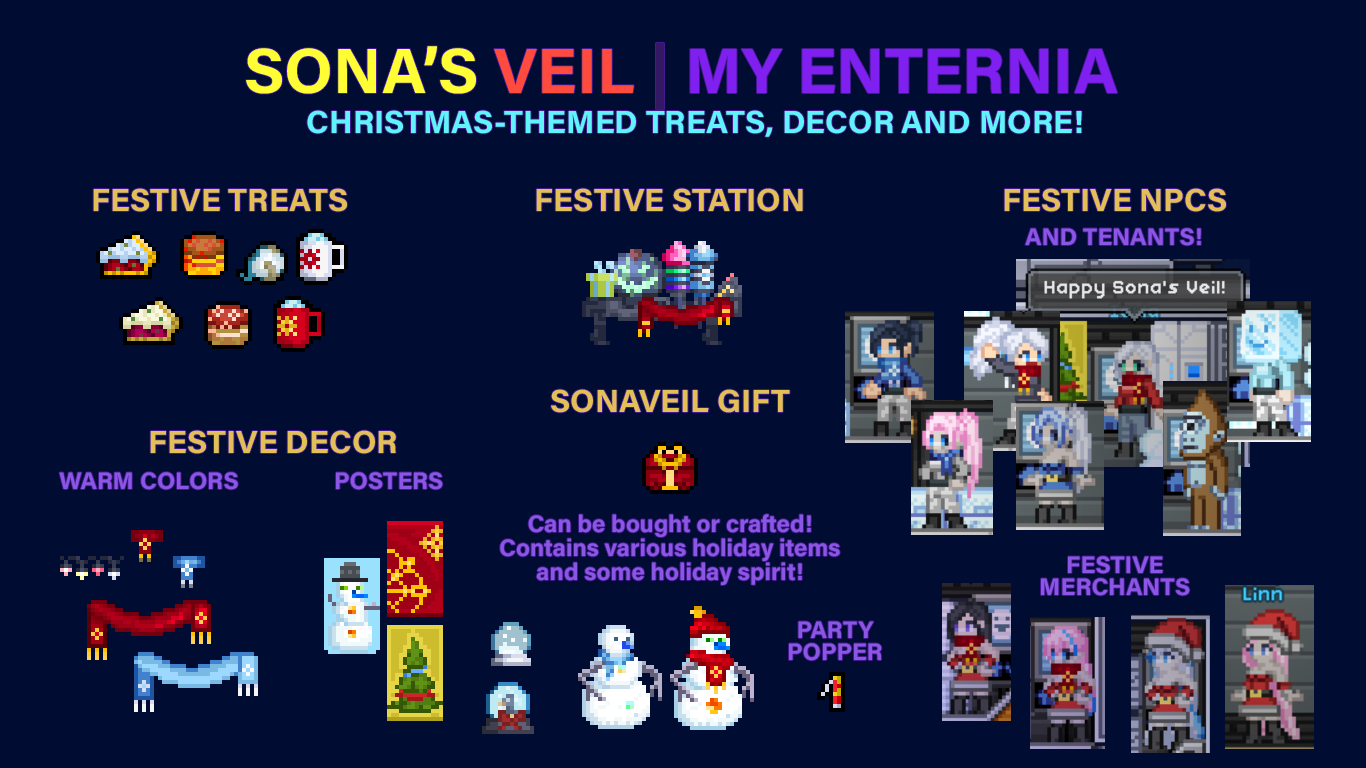
<style>
.page{position:relative;width:1366px;height:768px;background:#000c32}
.page>*{position:absolute;margin:0}
.t1{font:64px "AcuminConcept-Bold";color:#8020f0}
.t2{font:64px "AcuminConcept-Bold";color:#fffd33}
.t3{font:64px "AcuminConcept-Bold";color:#ff4b3d}
.t4{font:64px "AcuminConcept-Bold";color:#341863}
.t5{font:32px "AcuminConcept-Bold";color:#60f3fc}
.t6{font:32px "AcuminConcept-Bold";color:#e3c056}
.t7{font:24px "AcuminConcept-Bold";color:#8a56e3}
.t8{font:24px/24px "AcuminConcept-Bold";color:#8a56e3}
.t9{font:24px/21.3px "AcuminConcept-Bold";color:#8a56e3}
</style>
<div class="page">
<p class="t1" style="left:246px;top:43px;width:872px;height:67px"><span class="t2">SONA’S </span><span class="t3">VEIL </span><span class="t4">| </span>MY ENTERNIA</p>
<p class="t5" style="left:307px;top:110px;width:775px;height:27px">CHRISTMAS-THEMED TREATS, DECOR AND MORE!</p>
<p class="t6" style="left:93px;top:188px;width:254px;height:24px">FESTIVE TREATS</p>
<p class="t6" style="left:536px;top:188px;width:267px;height:24px">FESTIVE STATION</p>
<p class="t6" style="left:1004px;top:188px;width:222px;height:24px">FESTIVE NPCS</p>
<p class="t7" style="left:1025px;top:228px;width:176px;height:18px">AND TENANTS!</p>
<p class="t6" style="left:551px;top:389px;width:239px;height:24px">SONAVEIL GIFT</p>
<p class="t6" style="left:150px;top:430px;width:246px;height:24px">FESTIVE DECOR</p>
<p class="t7" style="left:59px;top:472px;width:179px;height:18px">WARM COLORS</p>
<p class="t7" style="left:336px;top:472px;width:107px;height:18px">POSTERS</p>
<p class="t8" style="left:500px;top:514px;width:340px;height:71px;text-align:center">Can be bought or crafted!<br>Contains various holiday items<br>and some holiday spirit!</p>
<p class="t9" style="left:1041px;top:556px;width:149px;height:40px;text-align:center">FESTIVE<br>MERCHANTS</p>
<p class="t9" style="left:789px;top:621px;width:93px;height:40px;text-align:center">PARTY<br>POPPER</p>
</div>
